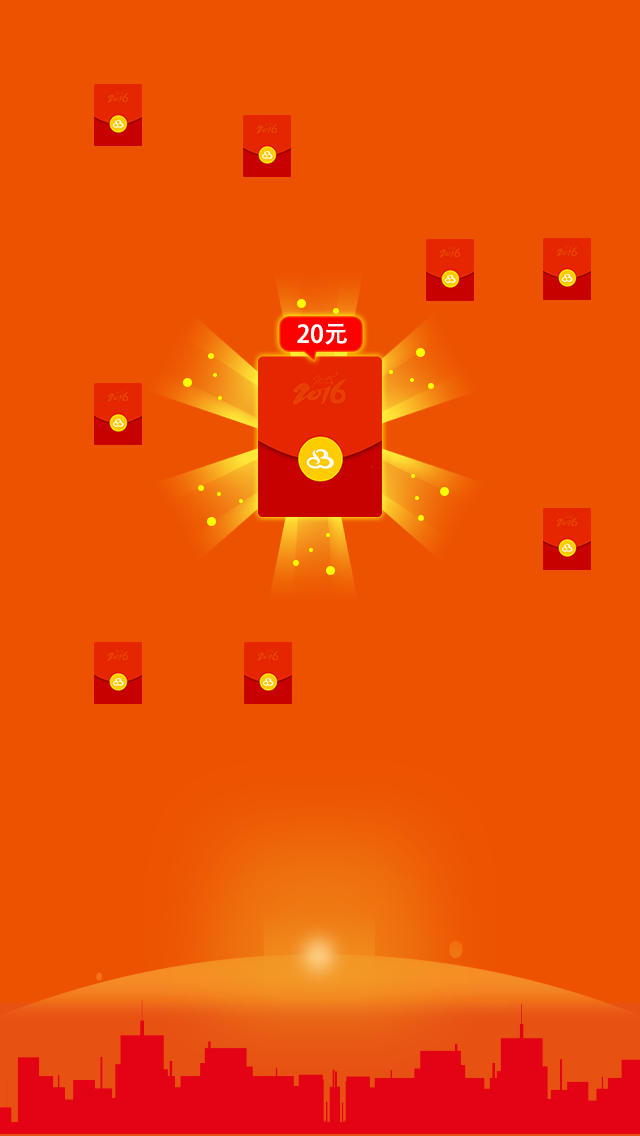
<style>
.page{position:relative;width:640px;height:1136px;background:#ed5200}
.page>*{position:absolute;margin:0}
.t1{font:24px "AdobeHeitiStd-Regular";letter-spacing:0.005em;color:#ffffff}
</style>
<div class="page">
<p class="t1" style="left:297px;top:323px;width:50px;height:22px">20元</p>
</div>
